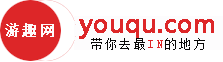
<style>
.page{position:relative;width:223px;height:62px;background:#ffffff}
.page>*{position:absolute;margin:0}
.t1{font:14px "SimSun";letter-spacing:0.2em;color:#fefafa;font-weight:bold}
.t2{font:24px "MicrosoftYaHei";color:#dd2628;font-weight:bold}
.t3{font:12px "SimSun";letter-spacing:0.2em;color:#080707}
.t4{font:12px "SimSun";letter-spacing:0.2em;color:#dd2628}
</style>
<div class="page">
<p class="t1" style="left:5px;top:23px;width:49px;height:14px">游趣网</p>
<p class="t2" style="left:79px;top:19px;width:135px;height:20px">youqu.com</p>
<p class="t3" style="left:91px;top:38px;width:114px;height:12px">带你去最<span class="t4">IN</span>的地方</p>
</div>
